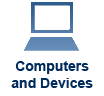
<style>
.page{position:relative;width:104px;height:96px;background:#ffffff}
.page>*{position:absolute;margin:0}
.t1{font:14px "Arial-BoldMT";color:#022b5d}
</style>
<div class="page">
<p class="t1" style="left:11px;top:61px;width:82px;height:27px;text-align:center">Computers<br>and Devices</p>
</div>
